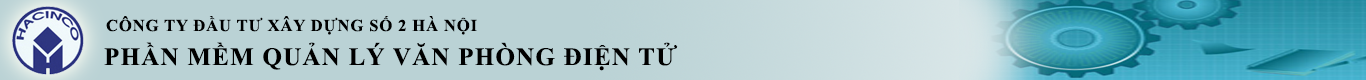
<style>
.page{position:relative;width:1366px;height:80px;background:#bad2d5}
.page>*{position:absolute;margin:0}
.t1{font:16.7px "TimesNewRomanPS-BoldMT";letter-spacing:0.05em;color:#000000}
.t2{font:25px "TimesNewRomanPS-BoldMT";letter-spacing:0.05em;color:#000000}
</style>
<div class="page">
<p class="t1" style="left:106px;top:16px;width:371px;height:19px">CÔNG TY ĐẦU TƯ XÂY DỰNG SỐ 2 HÀ NỘI</p>
<p class="t2" style="left:104px;top:42px;width:574px;height:29px">PHẦN MỀM QUẢN LÝ VĂN PHÒNG ĐIỆN TỬ</p>
</div>
